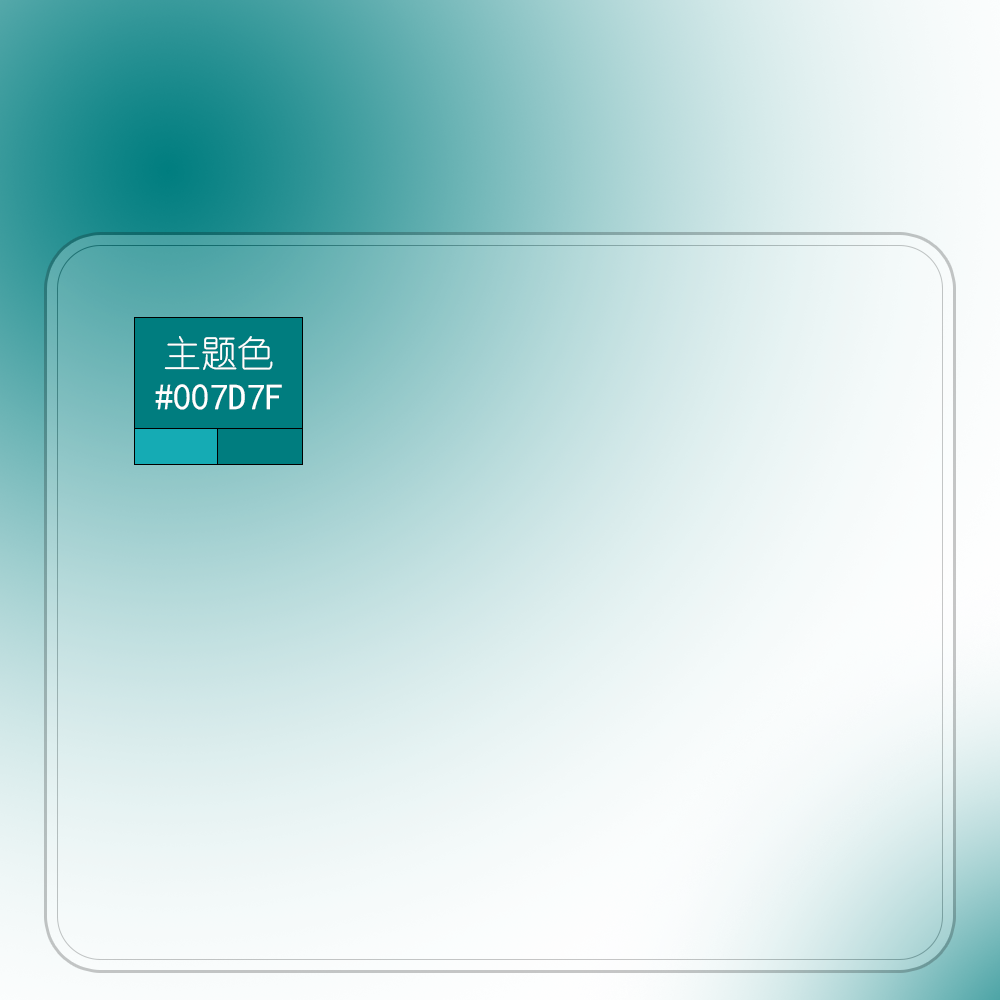
<style>
.page{position:relative;width:1000px;height:1000px}
.page>*{position:absolute;margin:0}
.t1{font:36.7px/45px "SimHei";color:#ffffff;text-transform:uppercase}
.t2{font:36.7px/45px "YouYuan";color:#ffffff;text-transform:uppercase}
</style>
<div class="page">
<p class="t1" style="left:155px;top:336px;width:127px;height:74px;text-align:center"><span class="t2">主题色<br></span>#007d7f</p>
</div>
